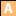
<style>
.page{position:relative;width:16px;height:16px;background:#fcbb71}
.page>*{position:absolute;margin:0}
.t1{font:14px "MyriadPro-Bold";color:#ffffff}
</style>
<div class="page">
<p class="t1" style="left:4px;top:3px;width:9px;height:10px">A</p>
</div>
